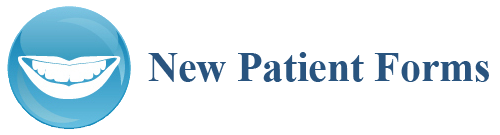
<style>
.page{position:relative;width:500px;height:135px;background:#ffffff}
.page>*{position:absolute;margin:0}
.t1{font:41.7px "TimesNewRomanPS-BoldMT";color:#29547f}
</style>
<div class="page">
<p class="t1" style="left:148px;top:52px;width:341px;height:30px">New Patient Forms</p>
</div>
